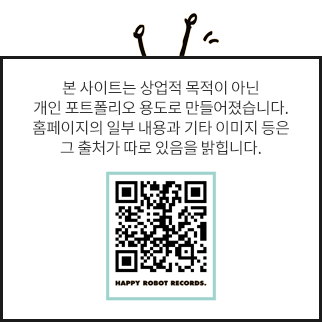
<style>
.page{position:relative;width:322px;height:322px;background:#ffffff}
.page>*{position:absolute;margin:0}
.t1{font:16px/20px "NotoSansKR-Regular";letter-spacing:-0.03em;color:#333333}
</style>
<div class="page">
<p class="t1" style="left:33px;top:80px;width:256px;height:75px;text-align:center">본 사이트는 상업적 목적이 아닌 <br>개인 포트폴리오 용도로 만들어졌습니다. 홈페이지의 일부 내용과 기타 이미지 등은<br>그 출처가 따로 있음을 밝힙니다.</p>
</div>
